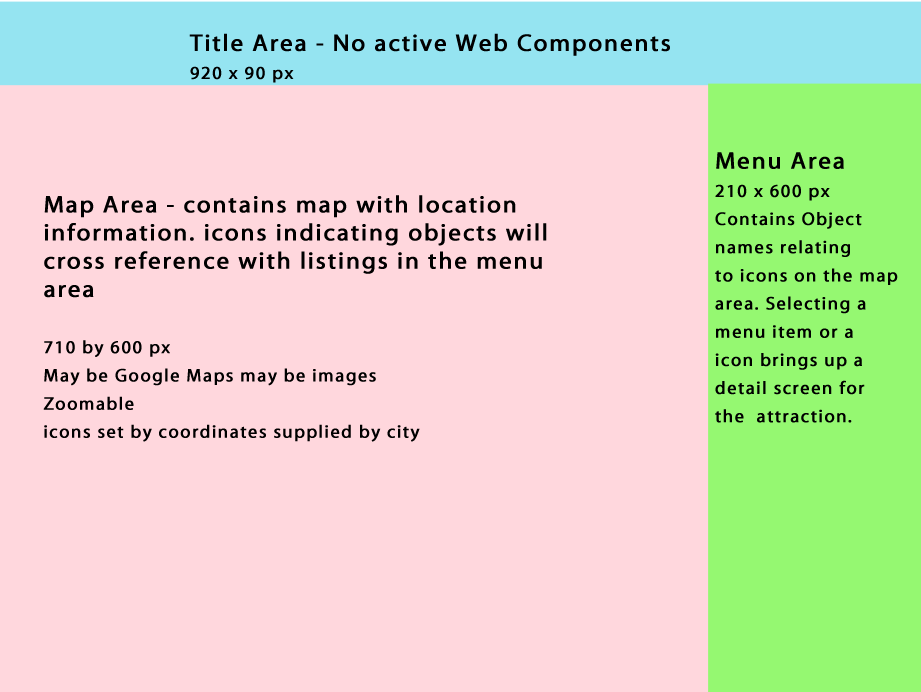
<style>
.page{position:relative;width:921px;height:692px;background:#ffd7dd}
.page>*{position:absolute;margin:0}
.t1{font:24px/28.2px "MyriadWebPro";letter-spacing:0.06em;color:#000000;font-weight:bold}
.t2{font:18px/28.2px "MyriadWebPro";letter-spacing:0.06em;color:#000000;font-weight:bold}
</style>
<div class="page">
<p class="t1" style="left:189px;top:33px;width:481px;height:50px">Title Area - No active Web Components<br><span class="t2">920 x 90 px</span></p>
<p class="t2" style="left:715px;top:152px;width:183px;height:271px"><span class="t1">Menu Area<br></span>210 x 600 px<br>Contains Object<br>names relating<br>to icons on the map<br>area. Selecting a<br>menu item or a <br>icon brings up a <br>detail screen for <br>the  attraction.</p>
<p class="t1" style="left:43px;top:195px;width:504px;height:247px">Map Area - contains map with location<br>information. icons indicating objects will<br>cross reference with listings in the menu<br>area<br><br><span class="t2">710 by 600 px<br>May be Google Maps may be images<br>Zoomable<br>icons set by coordinates supplied by city</span></p>
</div>
